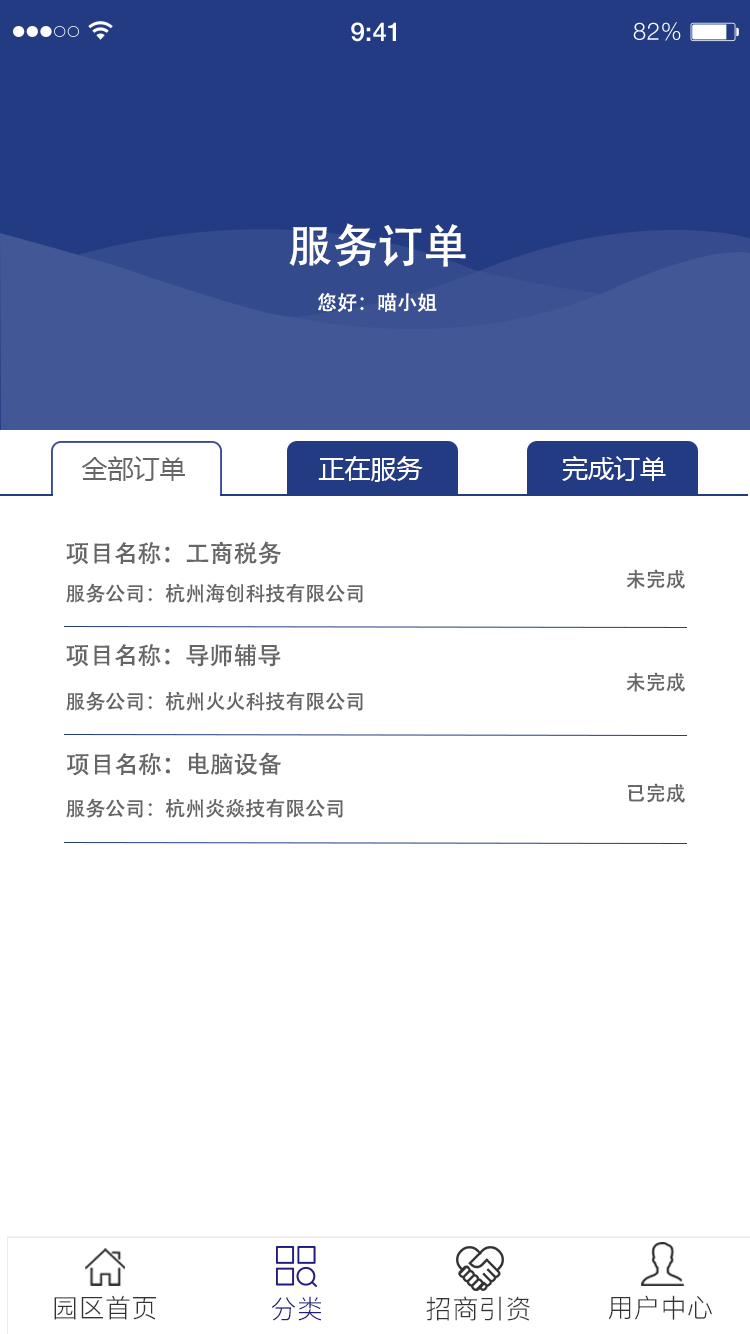
<style>
.page{position:relative;width:750px;height:1334px;background:#ffffff}
.page>*{position:absolute;margin:0}
.t1{font:26px "HelveticaNeue-Medium";color:#ffffff}
.t2{font:24px "HelveticaNeue-Light";letter-spacing:0.025em;color:#ffffff}
.t3{font:45.3px "AdobeHeitiStd-Regular";color:#ffffff}
.t4{font:20px "AdobeHeitiStd-Regular";color:#ffffff}
.t5{font:26px "MicrosoftYaHei";color:#666666}
.t6{font:26px "MicrosoftYaHei";color:#ffffff}
.t7{font:24px "AdobeHeitiStd-Regular";color:#666666}
.t8{font:20px "AdobeHeitiStd-Regular";color:#666666}
</style>
<div class="page">
<p class="t1" style="left:351px;top:22px;width:45px;height:20px">9:41</p>
<p class="t2" style="left:633px;top:22px;width:48px;height:19px">82%</p>
<p class="t3" style="left:289px;top:223px;width:177px;height:44px">服务订单</p>
<p class="t4" style="left:318px;top:293px;width:119px;height:19px">您好：喵小姐</p>
<p class="t5" style="left:81px;top:456px;width:104px;height:25px">全部订单</p>
<p class="t6" style="left:318px;top:456px;width:105px;height:26px">正在服务</p>
<p class="t6" style="left:562px;top:456px;width:104px;height:25px">完成订单</p>
<p class="t7" style="left:66px;top:541px;width:215px;height:24px">项目名称：工商税务</p>
<p class="t8" style="left:626px;top:569px;width:59px;height:20px">未完成</p>
<p class="t8" style="left:66px;top:583px;width:297px;height:20px">服务公司：杭州海创科技有限公司</p>
<p class="t7" style="left:66px;top:643px;width:215px;height:24px">项目名称：导师辅导</p>
<p class="t8" style="left:626px;top:672px;width:59px;height:20px">未完成</p>
<p class="t8" style="left:66px;top:691px;width:297px;height:20px">服务公司：杭州火火科技有限公司</p>
<p class="t7" style="left:67px;top:752px;width:214px;height:24px">项目名称：电脑设备</p>
<p class="t8" style="left:628px;top:783px;width:57px;height:20px">已完成</p>
<p class="t8" style="left:66px;top:798px;width:277px;height:20px">服务公司：杭州炎焱技有限公司</p>
</div>
